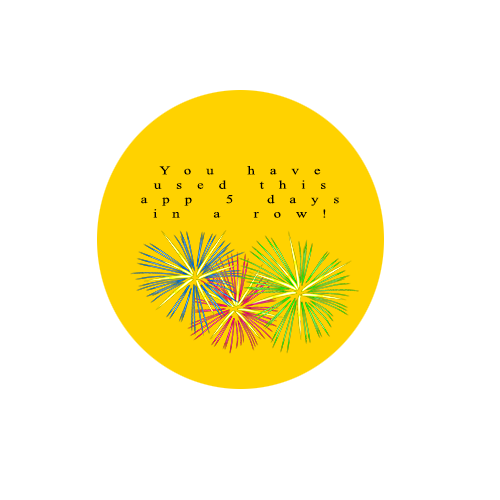
<style>
.page{position:relative;width:500px;height:500px;background:#ffffff}
.page>*{position:absolute;margin:0}
.t1{font:12px "TimesNewRomanPSMT";letter-spacing:0.985em;color:#000000;scale:1.26 1}
</style>
<div class="page">
<p class="t1" style="left:141px;top:166px;width:198px;height:52px;text-align:center">You have used this app 5 days in a row!</p>
</div>
